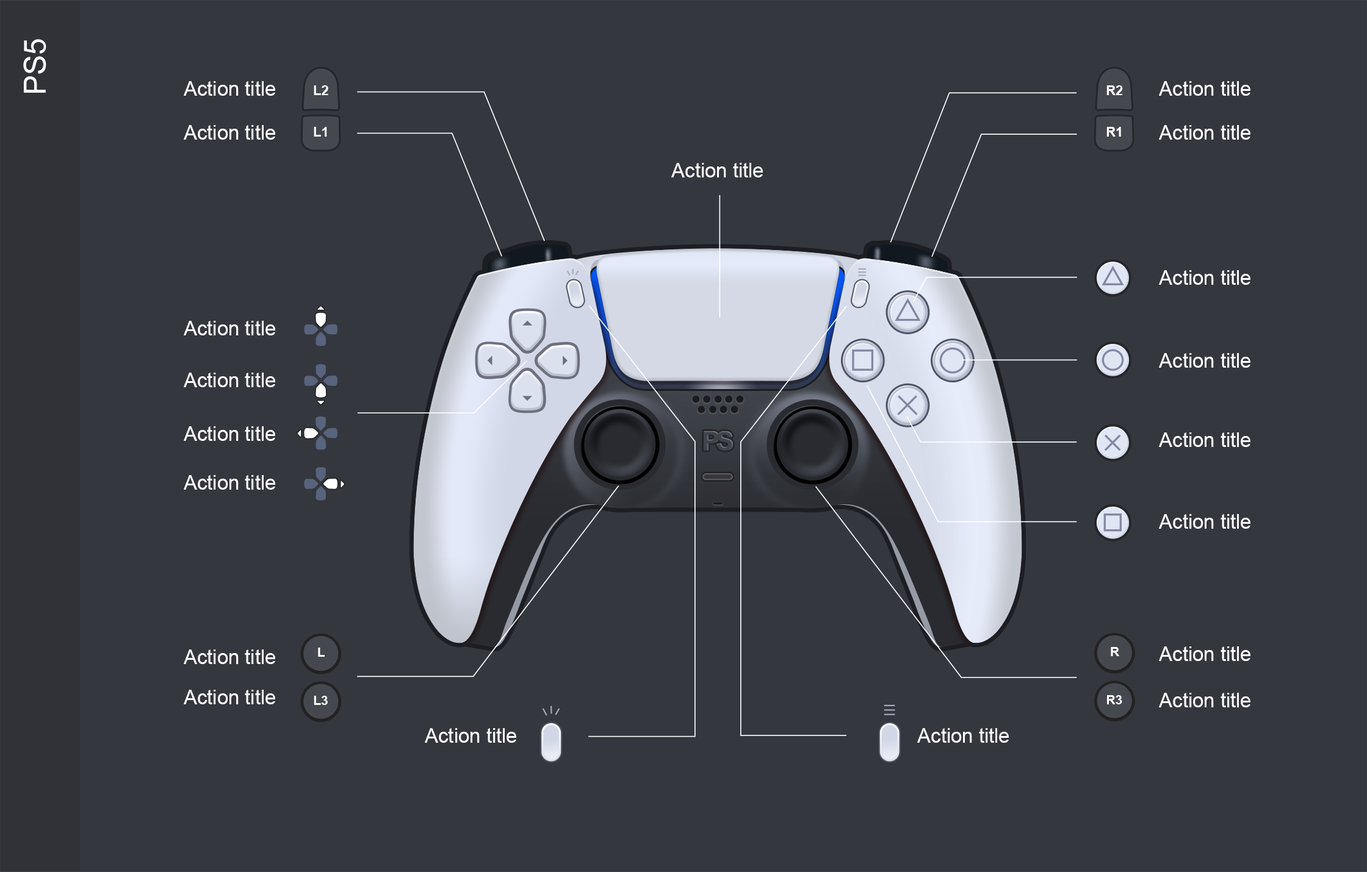
<style>
.page{position:relative;width:1367px;height:872px;background:#35373e}
.page>*{position:absolute;margin:0}
.t1{font:30.5px "ArialMT";color:#ffffff}
.t2{font:20px "ArialMT";color:#ffffff}
.t3{font:13.3px "Arial-BoldMT";color:#ffffff}
.t4{font:26.5px "Arial-BoldMT";letter-spacing:-0.15em;color:#3f444c;font-weight:bold}
.t5{font:12.8px "Arial-BoldMT";color:#ffffff}
</style>
<div class="page">
<p class="t1" style="left:23px;top:39px;width:23px;height:54px;rotate:-90deg">PS5</p>
<p class="t2" style="left:184px;top:81px;width:91px;height:15px">Action title</p>
<p class="t3" style="left:314px;top:85px;width:14px;height:10px">L2</p>
<p class="t3" style="left:1106px;top:85px;width:17px;height:10px">R2</p>
<p class="t2" style="left:1159px;top:81px;width:91px;height:15px">Action title</p>
<p class="t2" style="left:184px;top:125px;width:91px;height:15px">Action title</p>
<p class="t2" style="left:1159px;top:125px;width:91px;height:15px">Action title</p>
<p class="t3" style="left:314px;top:127px;width:13px;height:10px">L1</p>
<p class="t3" style="left:1106px;top:127px;width:15px;height:10px">R1</p>
<p class="t2" style="left:671px;top:163px;width:92px;height:15px">Action title</p>
<p class="t2" style="left:1159px;top:270px;width:91px;height:15px">Action title</p>
<p class="t2" style="left:184px;top:321px;width:91px;height:15px">Action title</p>
<p class="t2" style="left:1159px;top:353px;width:91px;height:15px">Action title</p>
<p class="t2" style="left:184px;top:373px;width:91px;height:14px">Action title</p>
<p class="t2" style="left:184px;top:426px;width:91px;height:15px">Action title</p>
<p class="t4" style="left:703px;top:431px;width:30px;height:20px">PS</p>
<p class="t2" style="left:1159px;top:433px;width:91px;height:14px">Action title</p>
<p class="t2" style="left:184px;top:475px;width:91px;height:15px">Action title</p>
<p class="t2" style="left:1159px;top:514px;width:91px;height:15px">Action title</p>
<p class="t2" style="left:184px;top:650px;width:91px;height:14px">Action title</p>
<p class="t5" style="left:318px;top:648px;width:7px;height:9px">L</p>
<p class="t5" style="left:1110px;top:647px;width:9px;height:10px">R</p>
<p class="t2" style="left:1159px;top:647px;width:91px;height:14px">Action title</p>
<p class="t2" style="left:184px;top:690px;width:91px;height:15px">Action title</p>
<p class="t5" style="left:314px;top:696px;width:14px;height:9px">L3</p>
<p class="t5" style="left:1107px;top:696px;width:15px;height:9px">R3</p>
<p class="t2" style="left:1159px;top:693px;width:91px;height:15px">Action title</p>
<p class="t2" style="left:425px;top:728px;width:91px;height:15px">Action title</p>
<p class="t2" style="left:917px;top:728px;width:92px;height:15px">Action title</p>
</div>
